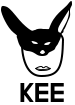
<style>
.page{position:relative;width:75px;height:105px;background:#ffffff}
.page>*{position:absolute;margin:0}
.t1{font:21.9px "BMDoHyeon";color:#000000}
</style>
<div class="page">
<p class="t1" style="left:20px;top:83px;width:44px;height:19px">KEE</p>
</div>
